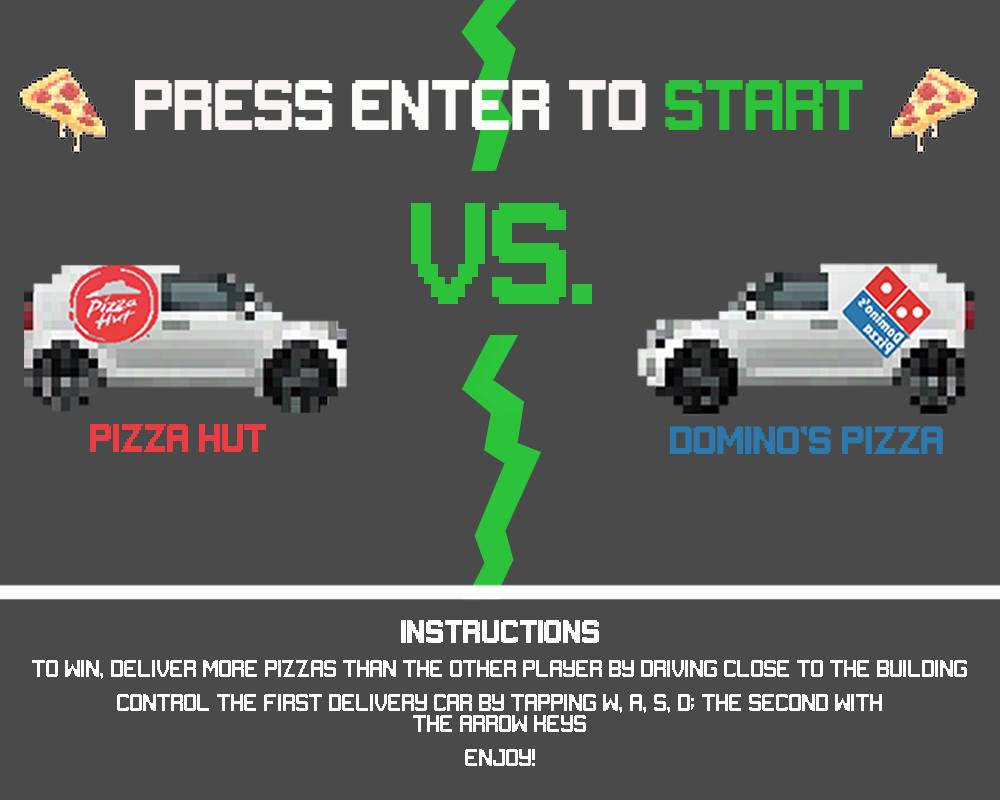
<style>
.page{position:relative;width:1000px;height:800px;background:#4a4a4a}
.page>*{position:absolute;margin:0}
.t1{font:107.7px "Gameplay";color:#2cc33b}
.t2{font:24px "Gameplay";color:#fcfcfc}
.t3{font:18px "Gameplay";color:#fcfcfc}
</style>
<div class="page">
<p class="t1" style="left:411px;top:203px;width:181px;height:101px">VS.</p>
<p class="t2" style="left:401px;top:620px;width:198px;height:23px">Instructions</p>
<p class="t3" style="left:32px;top:660px;width:935px;height:19px">To win, deliver more pizzas than the other player by driving close to the building</p>
<p class="t3" style="left:117px;top:694px;width:765px;height:38px;text-align:center">Control the first delivery car by tapping W, A, S, D; the second with <br>the arrow keys</p>
<p class="t3" style="left:465px;top:749px;width:70px;height:17px">Enjoy!</p>
</div>
